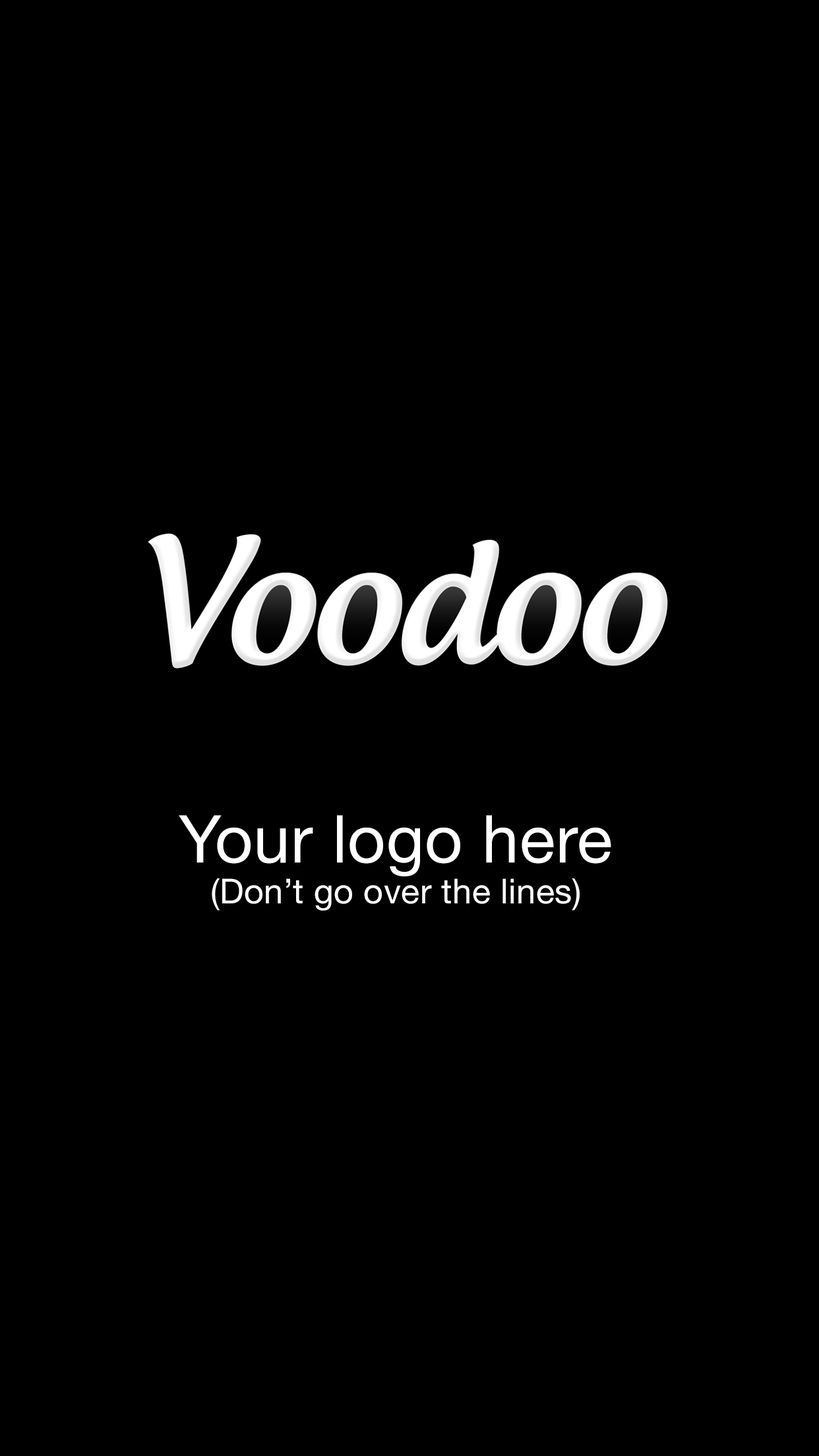
<style>
.page{position:relative;width:819px;height:1456px;background:#000000}
.page>*{position:absolute;margin:0}
.t1{font:34.3px "HelveticaNeue";letter-spacing:0.01em;color:#ffffff}
.t2{font:65.9px "HelveticaNeue";letter-spacing:0.01em;color:#ffffff}
</style>
<div class="page">
<p class="t1" style="left:179px;top:815px;width:432px;height:96px;text-align:center"><span class="t2">Your logo here<br></span>(Don’t go over the lines)</p>
</div>
